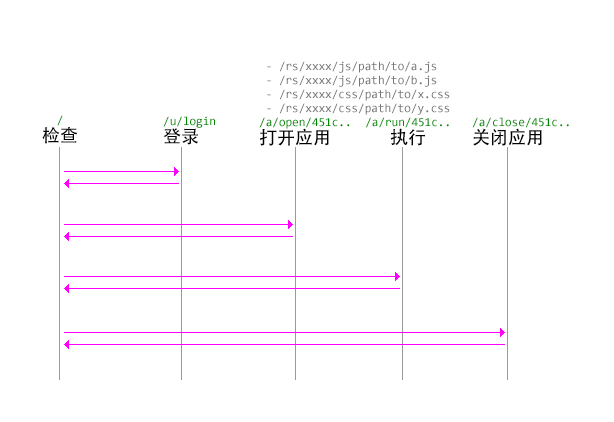
<style>
.page{position:relative;width:614px;height:422px;background:#ffffff}
.page>*{position:absolute;margin:0}
.t1{font:12px/14px "Consolas";color:#767676}
.t2{font:12px/14px "Consolas";color:#008800}
.t3{font:18px/18px "AdobeHeitiStd-Regular";color:#000000}
</style>
<div class="page">
<p class="t1" style="left:259px;top:61px;width:191px;height:85px">- /rs/xxxx/js/path/to/a.js<br> - /rs/xxxx/js/path/to/b.js<br> - /rs/xxxx/css/path/to/x.css<br> - /rs/xxxx/css/path/to/y.css<br><span class="t2">/a/open/451c..<br></span><span class="t3">打开应用</span></p>
<p class="t3" style="left:42px;top:115px;width:36px;height:29px;text-align:center"><span class="t2">/<br></span>检查</p>
<p class="t2" style="left:163px;top:116px;width:52px;height:29px">/u/login<br><span class="t3">登录</span></p>
<p class="t2" style="left:366px;top:117px;width:83px;height:29px;text-align:center">/a/run/451c..<br><span class="t3">执行</span></p>
<p class="t2" style="left:472px;top:117px;width:97px;height:29px">/a/close/451c..<br><span class="t3">关闭应用</span></p>
</div>
